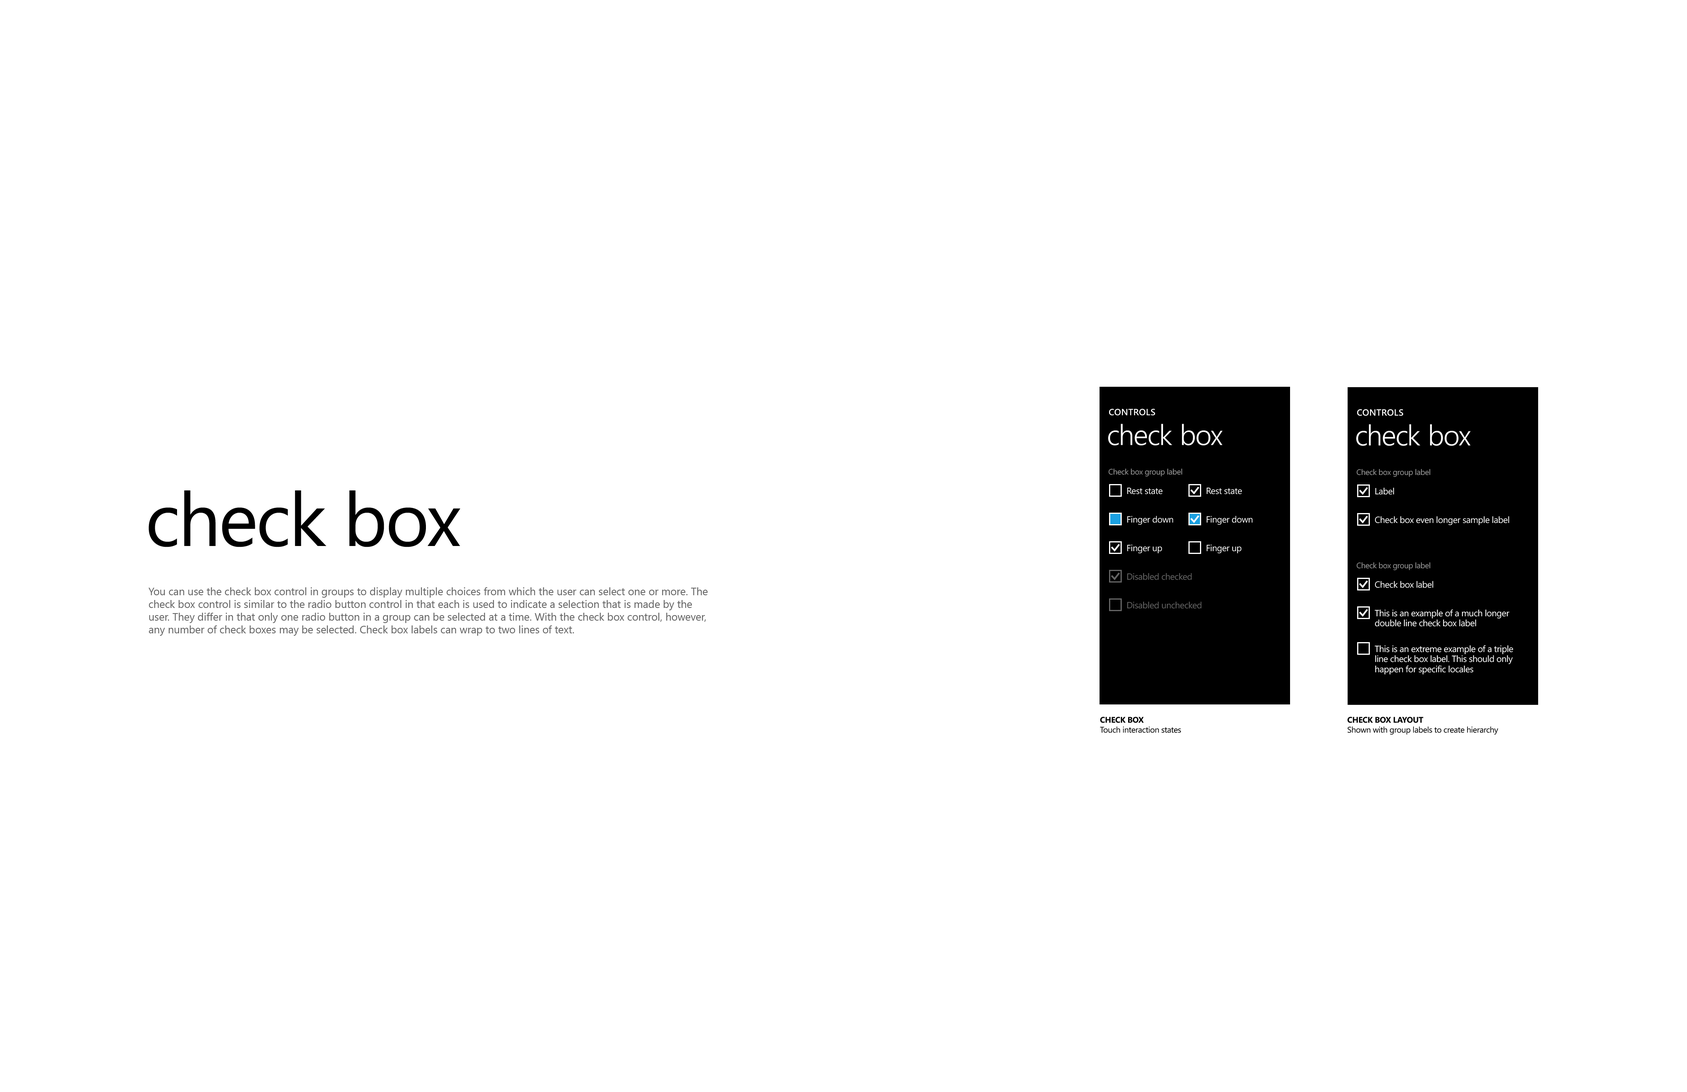
<style>
.page{position:relative;width:1687px;height:1092px;background:#ffffff}
.page>*{position:absolute;margin:0}
.t1{font:9px "SegoeWP-Semibold";letter-spacing:0.025em;color:#ffffff;text-transform:uppercase}
.t2{font:28.6px "SegoeWP-SemiLight";letter-spacing:-0.01em;color:#ffffff}
.t3{font:7.9px "SegoeWP";letter-spacing:-0.025em;color:#999999}
.t4{font:75.2px "SegoeWP";letter-spacing:-0.025em;color:#000000}
.t5{font:9px "SegoeWP";letter-spacing:-0.025em;color:#ffffff}
.t6{font:9px "SegoeWP";letter-spacing:-0.025em;color:#666666}
.t7{font:10.6px "SegoeUI";color:#666666}
.t8{font:9px/10.1px "SegoeWP";letter-spacing:-0.025em;color:#ffffff}
.t9{font:8.3px "SegoeWP";letter-spacing:-0.025em;color:#000000}
.t10{font:8.3px "SegoeWP-Bold";letter-spacing:-0.025em;color:#000000;text-transform:uppercase}
</style>
<div class="page">
<p class="t1" style="left:1109px;top:409px;width:46px;height:6px">controls</p>
<p class="t1" style="left:1358px;top:409px;width:46px;height:7px">controls</p>
<p class="t2" style="left:1108px;top:424px;width:115px;height:21px">check box</p>
<p class="t2" style="left:1356px;top:424px;width:115px;height:22px">check box</p>
<p class="t3" style="left:1109px;top:469px;width:74px;height:7px">Check box group label</p>
<p class="t3" style="left:1357px;top:469px;width:74px;height:8px">Check box group label</p>
<p class="t4" style="left:148px;top:490px;width:313px;height:57px">check box</p>
<p class="t5" style="left:1128px;top:488px;width:35px;height:6px">Rest state</p>
<p class="t5" style="left:1207px;top:488px;width:35px;height:6px">Rest state</p>
<p class="t5" style="left:1376px;top:488px;width:18px;height:7px">Label</p>
<p class="t5" style="left:1128px;top:516px;width:46px;height:9px">Finger down</p>
<p class="t5" style="left:1207px;top:516px;width:46px;height:9px">Finger down</p>
<p class="t5" style="left:1375px;top:516px;width:135px;height:9px">Check box even longer sample label</p>
<p class="t5" style="left:1128px;top:544px;width:35px;height:9px">Finger up</p>
<p class="t5" style="left:1207px;top:544px;width:35px;height:9px">Finger up</p>
<p class="t3" style="left:1357px;top:562px;width:74px;height:8px">Check box group label</p>
<p class="t6" style="left:1128px;top:573px;width:64px;height:7px">Disabled checked</p>
<p class="t5" style="left:1375px;top:581px;width:59px;height:7px">Check box label</p>
<p class="t7" style="left:148px;top:587px;width:560px;height:49px">You can use the check box control in groups to display multiple choices from which the user can select one or more. The check box control is similar to the radio button control in that each is used to indicate a selection that is made by the user. They differ in that only one radio button in a group can be selected at a time. With the check box control, however, any number of check boxes may be selected. Check box labels can wrap to two lines of text.</p>
<p class="t6" style="left:1128px;top:602px;width:74px;height:7px">Disabled unchecked</p>
<p class="t8" style="left:1375px;top:609px;width:135px;height:18px">This is an example of a much longer<br>double line check box label</p>
<p class="t8" style="left:1375px;top:645px;width:139px;height:30px">This is an extreme example of a triple<br>line check box label. This should only<br>happen for specific locales</p>
<p class="t9" style="left:1100px;top:717px;width:81px;height:16px"><span class="t10">check box<br></span>Touch interaction states</p>
<p class="t9" style="left:1348px;top:717px;width:151px;height:18px"><span class="t10">check box layout<br></span>Shown with group labels to create hierarchy</p>
</div>
